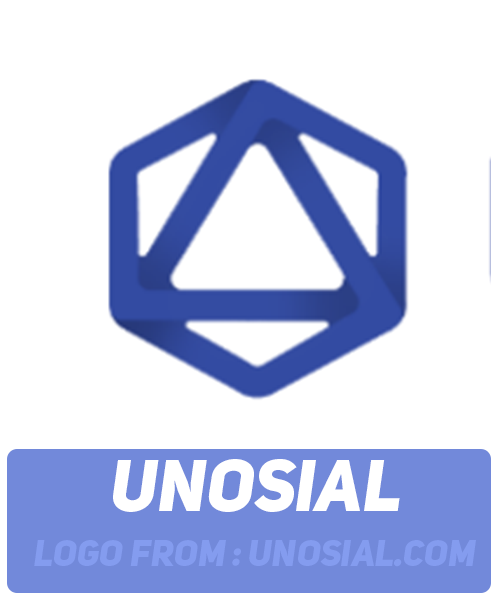
<style>
.page{position:relative;width:500px;height:600px;background:#ffffff}
.page>*{position:absolute;margin:0}
.t1{font:72px "UniSansHeavyItalicCAPS";color:#ffffff}
.t2{font:36px "UniSansHeavyItalicCAPS";color:#849cef}
</style>
<div class="page">
<p class="t1" style="left:113px;top:459px;width:287px;height:53px">Unosial</p>
<p class="t2" style="left:34px;top:540px;width:442px;height:27px">logo from : unosial.com</p>
</div>
